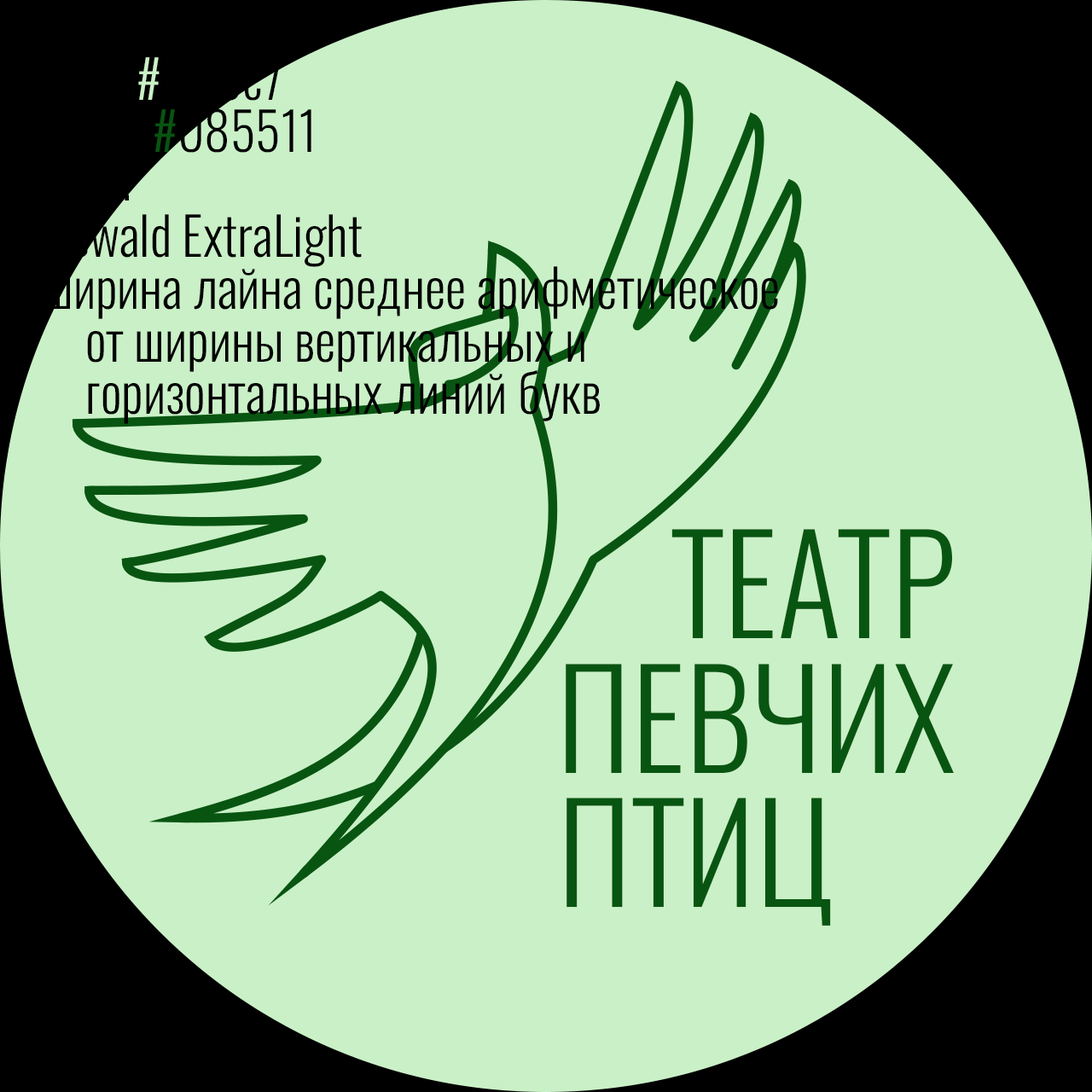
<style>
.page{position:relative;width:1092px;height:1092px;background:#caf0c7}
.page>*{position:absolute;margin:0}
.t1{font:52.4px/52.4px "Oswald-Light";color:#000000}
.t2{font:52.4px/52.4px "Oswald-Light";color:#caf0c7}
.t3{font:52.4px/52.4px "Oswald-Light";color:#085511}
.t4{font:134.4px/134.4px "Oswald-Light";color:#085511}
.t5{font:134.4px "Oswald-Light";color:#085511}
</style>
<div class="page">
<p class="t1" style="left:3px;top:17px;width:775px;height:407px">цвет:<br>    фон: <span class="t2">#</span>caf0c7<br>    лайн: <span class="t3">#</span>085511<br>шрифт:<br>    Oswald ExtraLight<br>    ширина лайна среднее арифметическое<br>        от ширины вертикальных и<br>        горизонтальных линий букв</p>
<p class="t4" style="left:566px;top:529px;width:388px;height:244px;text-align:right">ТЕАТР<br>ПЕВЧИХ</p>
<p class="t5" style="left:566px;top:798px;width:265px;height:128px">ПТИЦ</p>
</div>
